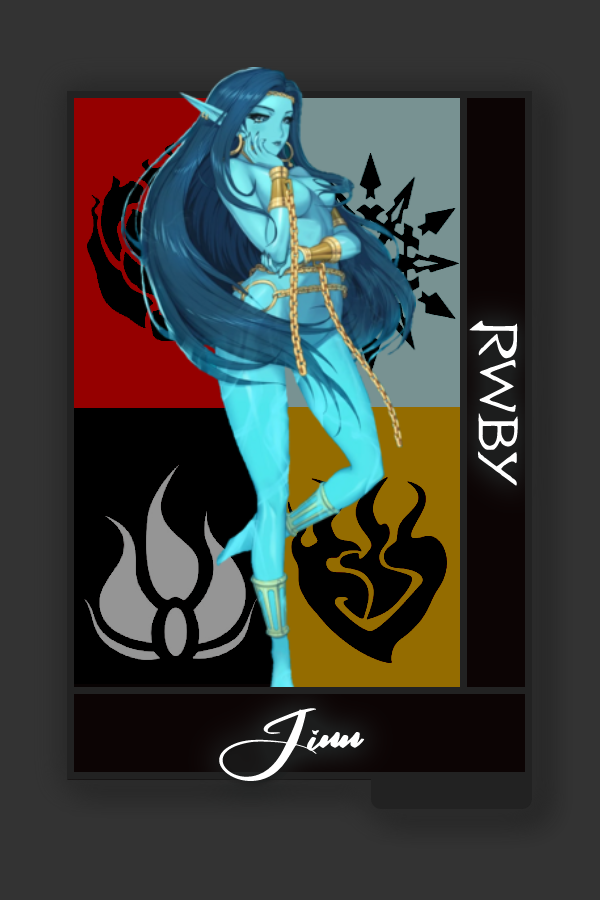
<style>
.page{position:relative;width:600px;height:900px;background:#333333}
.page>*{position:absolute;margin:0}
.t1{font:61.3px "RWBY_Style";color:#ffffff;scale:1.25 1}
.t2{font:75px "RosegaFREE";color:#ffffff}
</style>
<div class="page">
<p class="t1" style="left:469px;top:320px;width:49px;height:166px;rotate:90deg">RWBY</p>
<p class="t2" style="left:186px;top:707px;width:179px;height:101px">Jinn</p>
</div>
